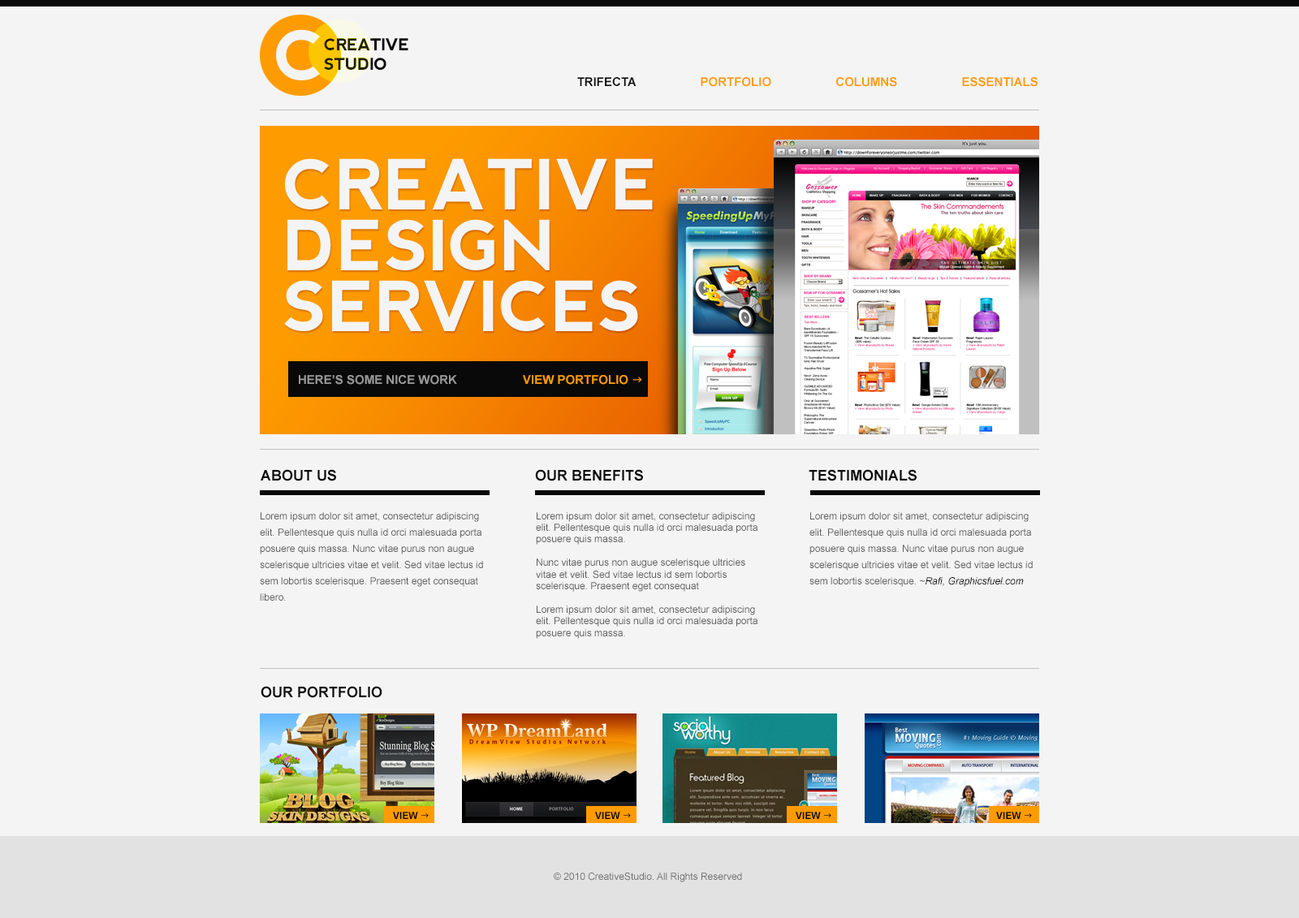
<style>
.page{position:relative;width:1299px;height:918px;background:#f4f4f4}
.page>*{position:absolute;margin:0}
.t1{font:12.2px "Arial-BoldMT";color:#fe9b00;text-transform:uppercase}
.t2{font:12.2px "Arial-BoldMT";color:#090909;text-transform:uppercase}
.t3{font:14.6px "Arial-BoldMT";color:#090909;text-transform:uppercase}
.t4{font:9.7px/16.2px "ArialMT";color:#5d5d5d}
.t5{font:9.7px "ArialMT";color:#5d5d5d}
.t6{font:9.7px/16.2px "Arial-ItalicMT";color:#090909}
.t7{font:9.7px "Arial-BoldMT";color:#090909;text-transform:uppercase}
.t8{font:9.7px "Wingdings3";color:#090909}
</style>
<div class="page">
<p class="t1" style="left:577px;top:77px;width:460px;height:10px"><span class="t2">TRIFECTA</span>                   PORTFOLIO                   COLUMNS                   ESSENTIALS</p>
<p class="t3" style="left:261px;top:469px;width:75px;height:12px">about us</p>
<p class="t3" style="left:535px;top:469px;width:108px;height:12px">our Benefits</p>
<p class="t3" style="left:809px;top:469px;width:107px;height:12px">testimonials</p>
<p class="t4" style="left:260px;top:512px;width:223px;height:89px">Lorem ipsum dolor sit amet, consectetur adipiscing elit. Pellentesque quis nulla id orci malesuada porta posuere quis massa. Nunc vitae purus non augue scelerisque ultricies vitae et velit. Sed vitae lectus id sem lobortis scelerisque. Praesent eget consequat libero.</p>
<p class="t5" style="left:536px;top:512px;width:221px;height:127px">Lorem ipsum dolor sit amet, consectetur adipiscing elit. Pellentesque quis nulla id orci malesuada porta posuere quis massa. <br><br>Nunc vitae purus non augue scelerisque ultricies vitae et velit. Sed vitae lectus id sem lobortis scelerisque. Praesent eget consequat<br><br>Lorem ipsum dolor sit amet, consectetur adipiscing elit. Pellentesque quis nulla id orci malesuada porta posuere quis massa.</p>
<p class="t4" style="left:809px;top:512px;width:224px;height:75px">Lorem ipsum dolor sit amet, consectetur adipiscing elit. Pellentesque quis nulla id orci malesuada porta posuere quis massa. Nunc vitae purus non augue scelerisque ultricies vitae et velit. Sed vitae lectus id sem lobortis scelerisque. ~<span class="t6">Rafi, Graphicsfuel.com</span></p>
<p class="t3" style="left:261px;top:686px;width:121px;height:12px">our portfolio</p>
<p class="t7" style="left:393px;top:812px;width:36px;height:7px">view <span class="t8">g</span></p>
<p class="t7" style="left:595px;top:812px;width:36px;height:7px">view <span class="t8">g</span></p>
<p class="t7" style="left:796px;top:812px;width:35px;height:7px">view <span class="t8">g</span></p>
<p class="t7" style="left:996px;top:812px;width:36px;height:7px">view <span class="t8">g</span></p>
</div>
